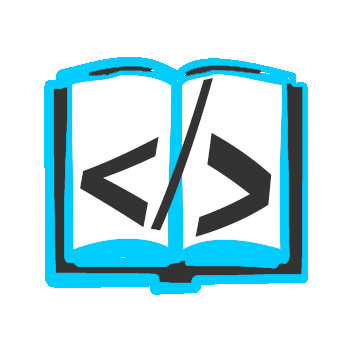
<style>
.page{position:relative;width:360px;height:360px;background:#ffffff}
.page>*{position:absolute;margin:0}
.t1{font:192.1px "SansSerifBoldOblique";color:#333333;scale:0.72 1}
</style>
<div class="page">
<p class="t1" style="left:80px;top:78px;width:192px;height:159px">&lt;/&gt;</p>
</div>
